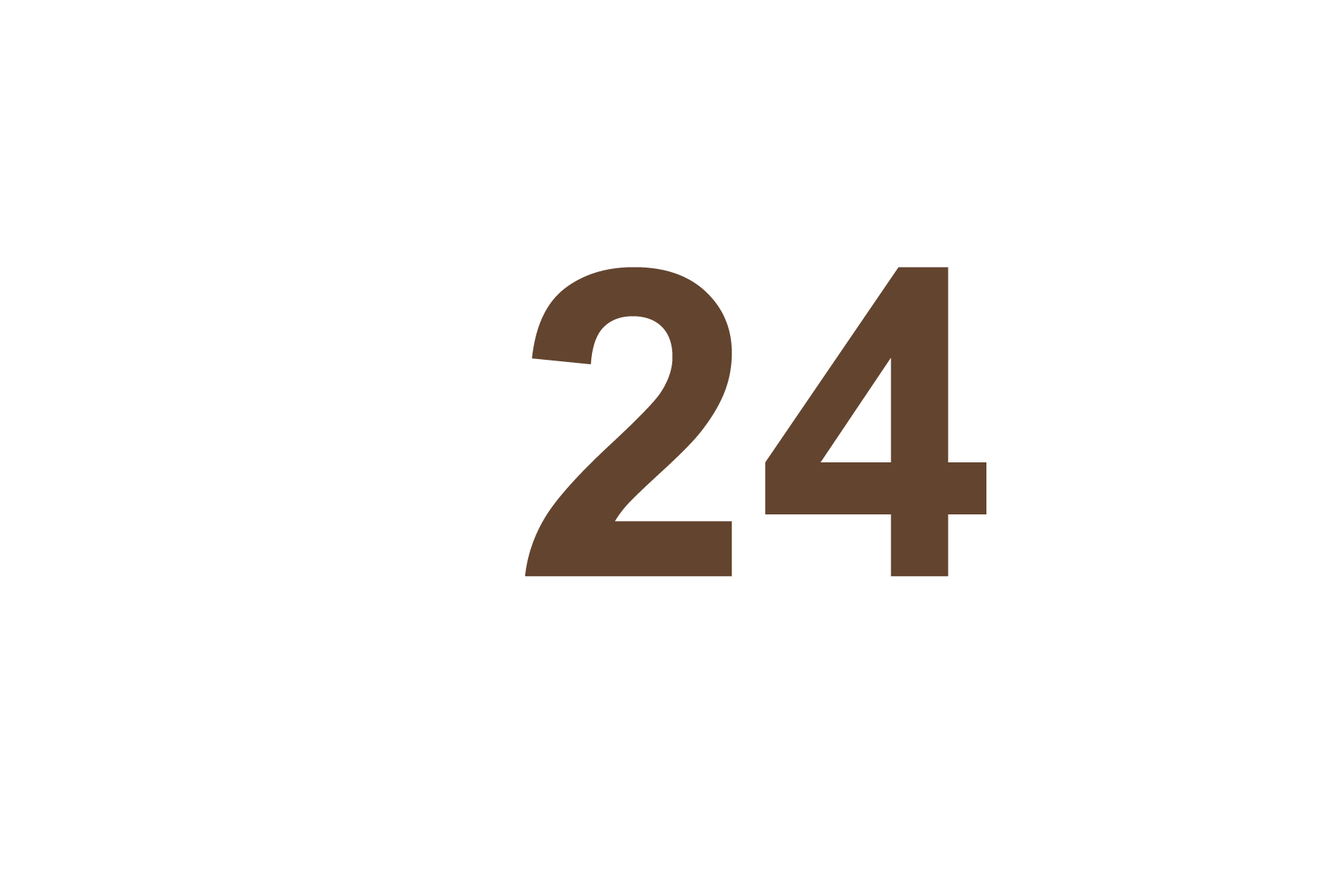
<style>
.page{position:relative;width:1337px;height:892px;background:#ffffff}
.page>*{position:absolute;margin:0}
.t1{font:429.6px "Arial-BoldMT";color:#63442f}
</style>
<div class="page">
<p class="t1" style="left:525px;top:267px;width:462px;height:310px">24</p>
</div>
